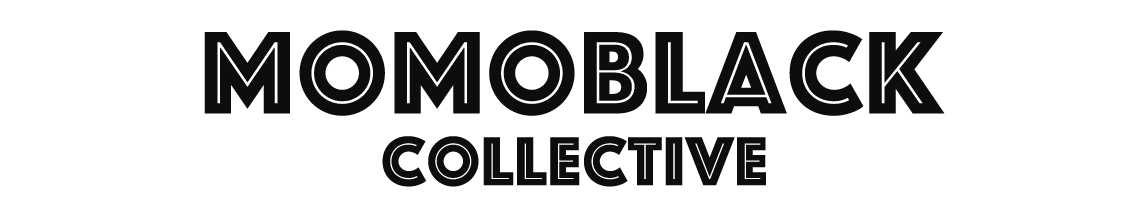
<style>
.page{position:relative;width:1148px;height:221px;background:#ffffff}
.page>*{position:absolute;margin:0}
.t1{font:121.3px "Phosphate-Inline";color:#0d0d0c;font-weight:bold}
.t2{font:71.1px "Phosphate-Inline";color:#0d0d0c;font-weight:bold}
</style>
<div class="page">
<p class="t1" style="left:204px;top:30px;width:741px;height:86px">Momoblack</p>
<p class="t2" style="left:382px;top:136px;width:384px;height:51px">collective</p>
</div>
